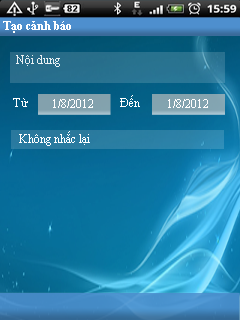
<style>
.page{position:relative;width:240px;height:320px}
.page>*{position:absolute;margin:0}
.t1{font:11.6px "TimesNewRomanPS-BoldMT";color:#ffffff}
.t2{font:11.6px "TimesNewRomanPSMT";color:#ffffff}
</style>
<div class="page">
<p class="t1" style="left:3px;top:21px;width:68px;height:12px">Tạo cảnh báo</p>
<p class="t2" style="left:16px;top:55px;width:44px;height:12px;opacity:0.9">Nội dung</p>
<p class="t2" style="left:13px;top:98px;width:15px;height:9px">Từ</p>
<p class="t2" style="left:53px;top:99px;width:40px;height:9px">1/8/2012</p>
<p class="t2" style="left:120px;top:95px;width:20px;height:12px">Đến</p>
<p class="t2" style="left:168px;top:99px;width:40px;height:9px">1/8/2012</p>
<p class="t2" style="left:19px;top:131px;width:71px;height:15px">Không nhắc lại</p>
</div>
